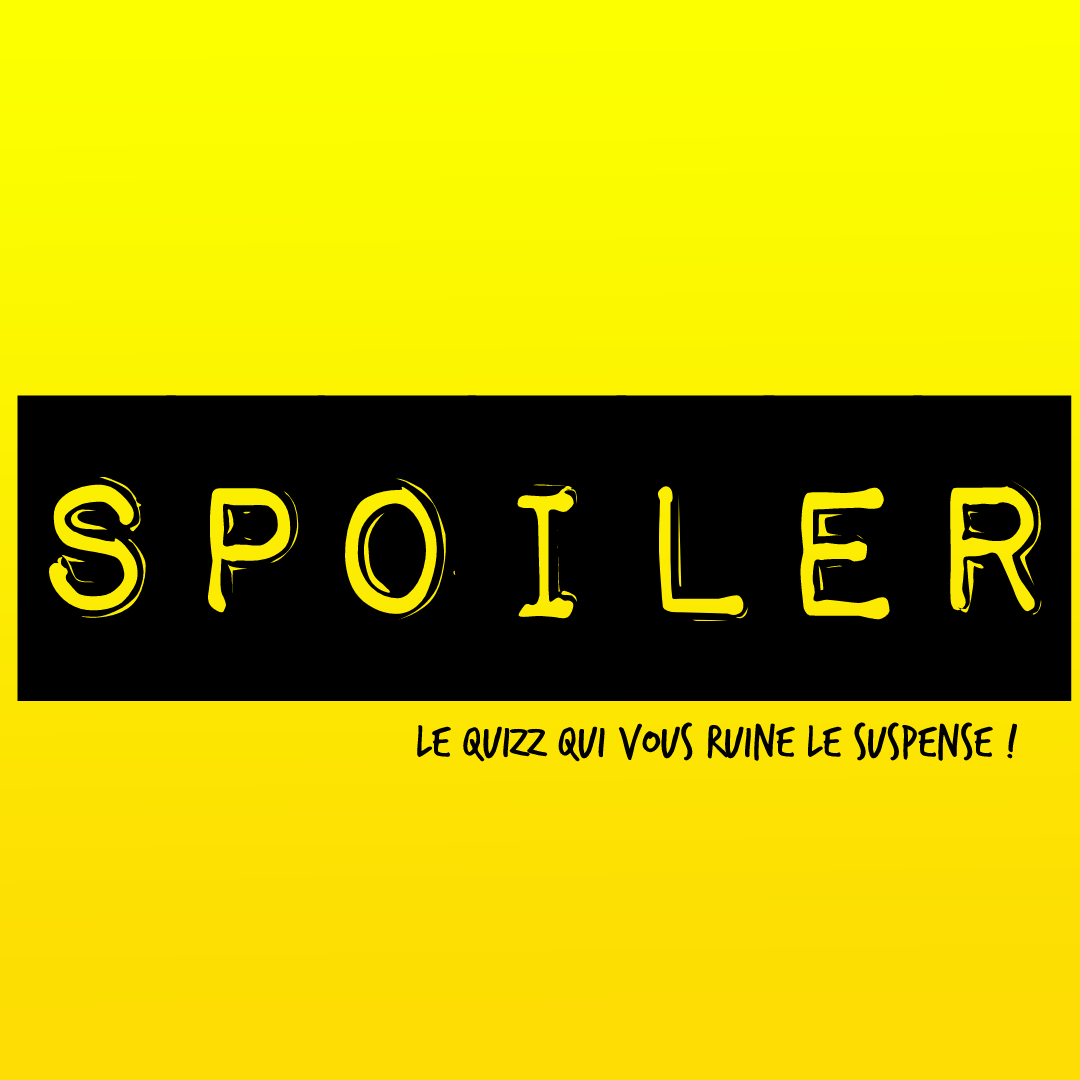
<style>
.page{position:relative;width:1080px;height:1080px;background:#000000}
.page>*{position:absolute;margin:0}
.t1{font:250px "ImpactLabel";color:#000000}
.t2{font:50px "TrashHand";color:#000000}
</style>
<div class="page">
<p class="t1" style="left:17px;top:395px;width:1055px;height:306px">SPOILER</p>
<p class="t2" style="left:417px;top:722px;width:601px;height:40px">LE QUIZZ QUI VOUS RUINE LE SUSPENSE !</p>
</div>
